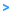
<style>
.page{position:relative;width:12px;height:15px;background:#ffffff}
.page>*{position:absolute;margin:0}
.t1{font:14px "Calibri-Bold";color:#3399ff}
</style>
<div class="page">
<p class="t1" style="left:3px;top:4px;width:7px;height:7px">&gt;</p>
</div>
